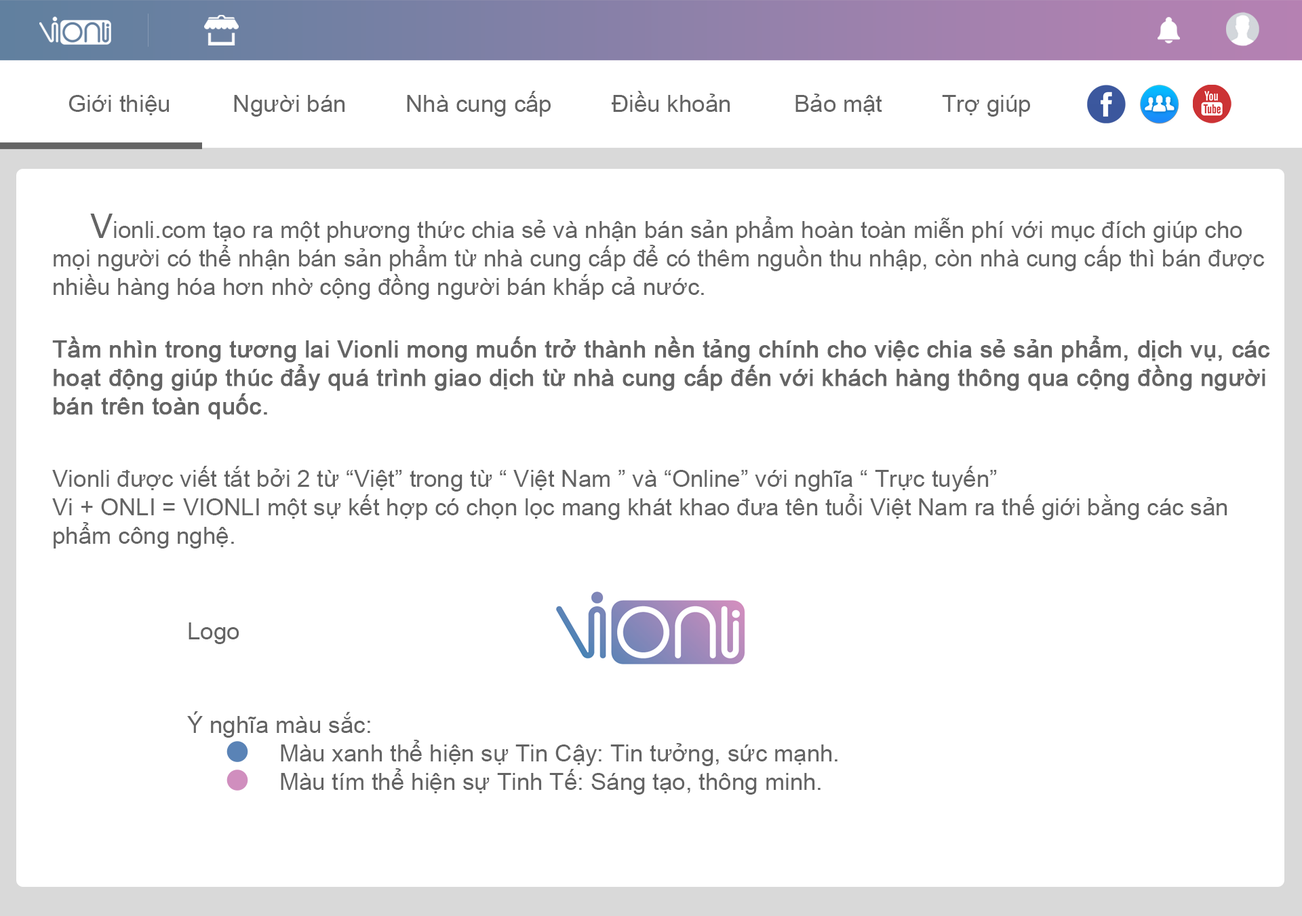
<style>
.page{position:relative;width:1302px;height:916px;background:#ffffff}
.page>*{position:absolute;margin:0}
.t1{font:23.7px "ArialMT";color:#646464}
.t2{font:33.9px "ArialMT";color:#646464}
.t3{font:23.7px "ArialMT";color:#646464;font-weight:bold}
</style>
<div class="page">
<p class="t1" style="left:68px;top:95px;width:101px;height:20px">Giới thiệu</p>
<p class="t1" style="left:234px;top:95px;width:111px;height:22px">Người bán</p>
<p class="t1" style="left:407px;top:91px;width:144px;height:26px">Nhà cung cấp</p>
<p class="t1" style="left:612px;top:91px;width:118px;height:21px">Điều khoản</p>
<p class="t1" style="left:795px;top:94px;width:87px;height:21px">Bảo mật</p>
<p class="t1" style="left:942px;top:95px;width:88px;height:22px">Trợ giúp</p>
<p class="t1" style="left:54px;top:214px;width:1210px;height:86px"><span class="t2">    V</span>ionli.com tạo ra một phương thức chia sẻ và nhận bán sản phẩm hoàn toàn miễn phí với mục đích giúp cho<br>mọi người có thể nhận bán sản phẩm từ nhà cung cấp để có thêm nguồn thu nhập, còn nhà cung cấp thì bán được <br>nhiều hàng hóa hơn nhờ cộng đồng người bán khắp cả nước.</p>
<p class="t3" style="left:52px;top:336px;width:1218px;height:84px">Tầm nhìn trong tương lai Vionli mong muốn trở thành nền tảng chính cho việc chia sẻ sản phẩm, dịch vụ, các<br>hoạt động giúp thúc đẩy quá trình giao dịch từ nhà cung cấp đến với khách hàng thông qua cộng đồng người<br>bán trên toàn quốc.</p>
<p class="t1" style="left:52px;top:466px;width:1175px;height:83px">Vionli được viết tắt bởi 2 từ “Việt” trong từ “ Việt Nam ” và “Online” với nghĩa “ Trực tuyến”<br>Vi + ONLI = VIONLI một sự kết hợp có chọn lọc mang khát khao đưa tên tuổi Việt Nam ra thế giới bằng các sản <br>phẩm công nghệ.</p>
<p class="t1" style="left:188px;top:622px;width:51px;height:22px">Logo</p>
<p class="t1" style="left:187px;top:711px;width:650px;height:84px">Ý nghĩa màu sắc: <br>   Màu xanh thể hiện sự Tin Cậy: Tin tưởng, sức mạnh.<br>   Màu tím thể hiện sự Tinh Tế: Sáng tạo, thông minh.</p>
</div>
